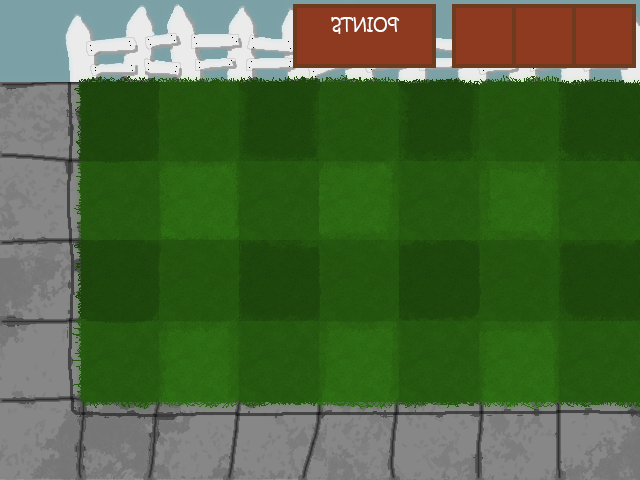
<style>
.page{position:relative;width:640px;height:480px}
.page>*{position:absolute;margin:0}
.t1{font:16px "KristenITC-Regular";color:#ffffff}
</style>
<div class="page">
<p class="t1" style="left:331px;top:17px;width:69px;height:17px;rotate:180deg">POINTS</p>
</div>
